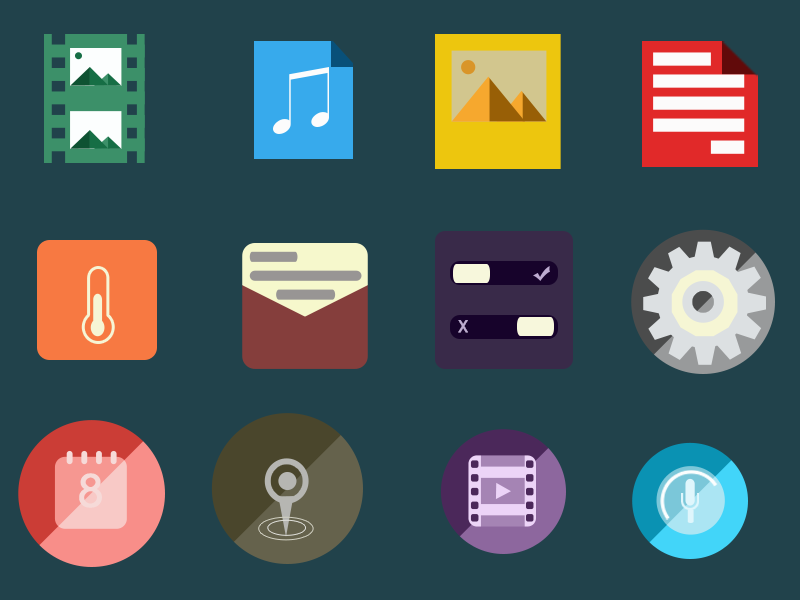
<style>
.page{position:relative;width:800px;height:600px;background:#21424b}
.page>*{position:absolute;margin:0}
.t1{font:16px "STHeitiSC-Medium";color:#beacd1;font-weight:bold}
.t2{font:43.9px "STHeitiSC-Medium";color:#f6dad8;font-weight:bold}
</style>
<div class="page">
<p class="t1" style="left:458px;top:320px;width:10px;height:13px">X</p>
<p class="t2" style="left:79px;top:473px;width:23px;height:35px">8</p>
</div>
